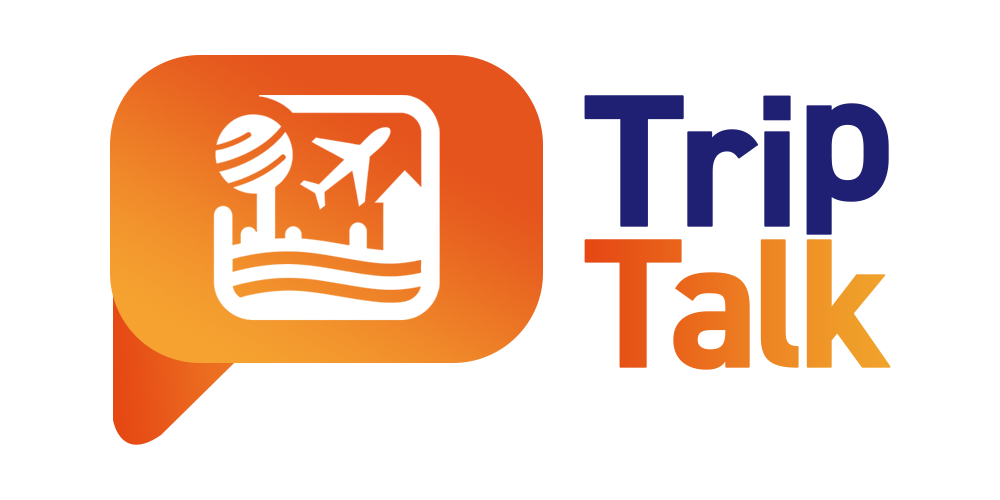
<style>
.page{position:relative;width:1000px;height:500px;background:#ffffff}
.page>*{position:absolute;margin:0}
.t1{font:188.1px "FONTSPRINGDEMO-DIN2014BoldRegular";letter-spacing:-0.04em;color:#1f2073;font-weight:bold}
.t2{font:186.5px "FONTSPRINGDEMO-DIN2014BoldRegular";color:#1f2073;font-weight:bold}
.t3{font:183.9px "FONTSPRINGDEMO-DIN2014BoldRegular";letter-spacing:-0.06em;font-weight:bold}
</style>
<div class="page">
<p class="t1" style="left:584px;top:95px;width:207px;height:132px">Tri</p>
<p class="t2" style="left:806px;top:103px;width:83px;height:132px">p</p>
<p class="t3" style="left:584px;top:239px;width:307px;height:131px">Talk</p>
</div>
